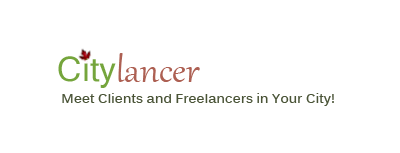
<style>
.page{position:relative;width:400px;height:153px;background:#ffffff}
.page>*{position:absolute;margin:0}
.t1{font:43.7px "Gabriola";color:#ad6053}
.t2{font:32.8px "Kartika";color:#75a53c}
.t3{font:13.3px "Kalinga-Bold";color:#4a5437}
</style>
<div class="page">
<p class="t1" style="left:118px;top:53px;width:82px;height:29px">lancer</p>
<p class="t2" style="left:58px;top:56px;width:58px;height:32px">City</p>
<p class="t3" style="left:62px;top:93px;width:272px;height:13px">Meet Clients and Freelancers in Your City!</p>
</div>
